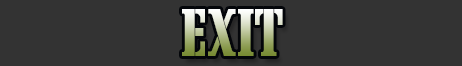
<style>
.page{position:relative;width:462px;height:66px;background:#333333}
.page>*{position:absolute;margin:0}
.t1{font:48px "CargoCrate"}
</style>
<div class="page">
<p class="t1" style="left:182px;top:9px;width:101px;height:47px">Exit</p>
</div>
